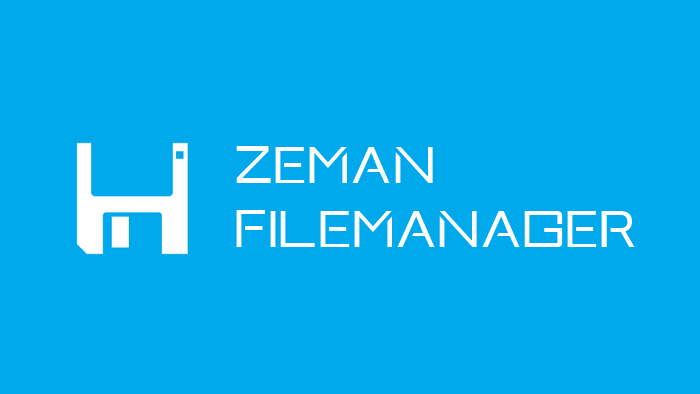
<style>
.page{position:relative;width:700px;height:394px;background:#00a9ec}
.page>*{position:absolute;margin:0}
.t1{font:53.3px "Xperia";color:#ffffff}
</style>
<div class="page">
<p class="t1" style="left:236px;top:146px;width:399px;height:101px">zeman<br>filemanager</p>
</div>
